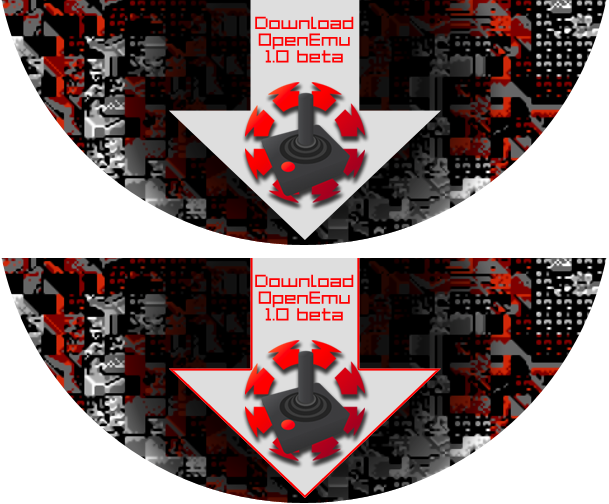
<style>
.page{position:relative;width:609px;height:504px;background:#ffffff}
.page>*{position:absolute;margin:0}
.t1{font:14px "GrixelAcme7Wide";color:#ff0002}
</style>
<div class="page">
<p class="t1" style="left:255px;top:16px;width:99px;height:47px;text-align:center">Download<br>OpenEmu<br>1.0 beta</p>
<p class="t1" style="left:255px;top:274px;width:99px;height:47px;text-align:center">Download<br>OpenEmu<br>1.0 beta</p>
</div>
